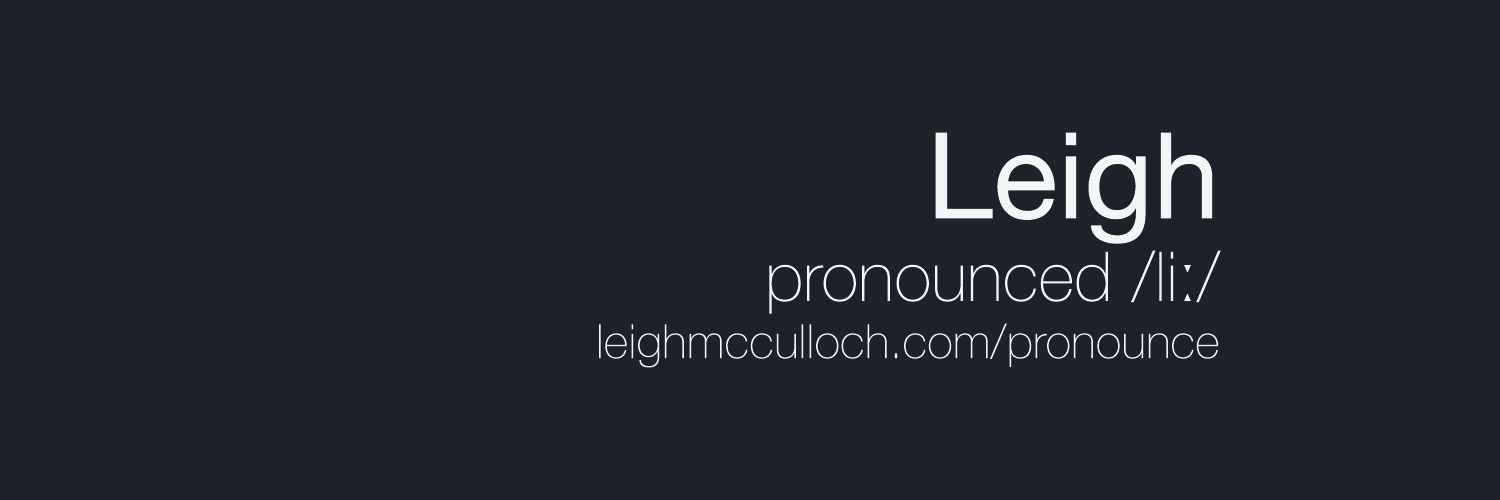
<style>
.page{position:relative;width:1500px;height:500px;background:#1d212a}
.page>*{position:absolute;margin:0}
.t1{font:47.5px "HelveticaNeue-Thin";color:#f3f6f6}
.t2{font:120px/54.2px "HelveticaNeue";color:#f3f6f6}
.t3{font:68.9px "HelveticaNeue-Thin";color:#f3f6f6}
.t4{font:68.9px "ArialMT";color:#f3f6f6}
</style>
<div class="page">
<p class="t1" style="left:599px;top:132px;width:622px;height:236px;text-align:right"><span class="t2">Leigh<br></span><span class="t3">pronounced /li</span><span class="t4">ː</span><span class="t3">/<br></span>leighmcculloch.com/pronounce</p>
</div>
